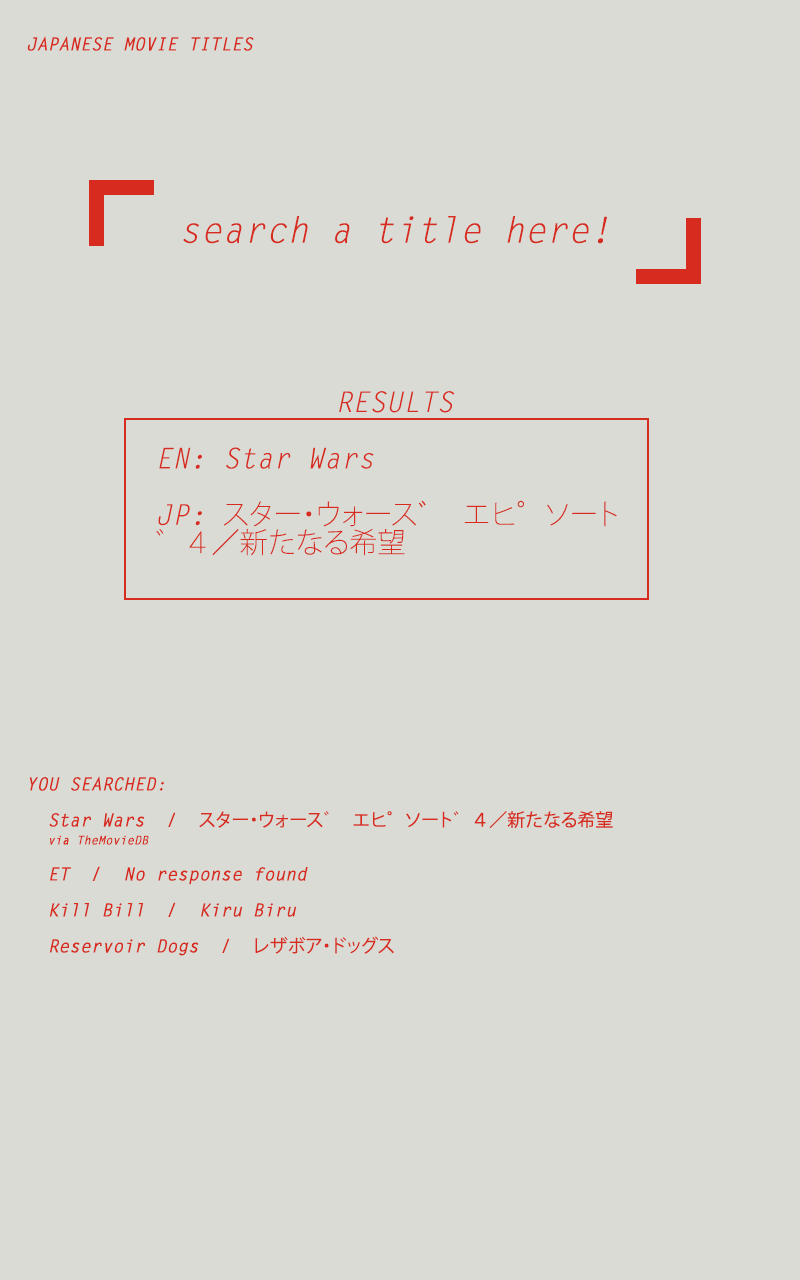
<style>
.page{position:relative;width:800px;height:1280px;background:#dbdbd5}
.page>*{position:absolute;margin:0}
.t1{font:18px "LetterGothicStd-BoldSlanted";color:#d62b1e}
.t2{font:36px "LetterGothicStd-Slanted";color:#d62b1e}
.t3{font:28.2px/56.4px "LetterGothicStd-Slanted";color:#d62b1e}
.t4{font:28.2px/28.2px "KozGoPr6N-ExtraLight";color:#d62b1e}
.t5{font:28.2px/28.2px "KozGoPr6N-Regular";color:#d62b1e}
.t6{font:18px/18px "LetterGothicStd-BoldSlanted";color:#d62b1e}
.t7{font:18px/72px "LetterGothicStd-BoldSlanted";color:#d62b1e}
.t8{font:18px/18px "KozGoPr6N-Regular";color:#d62b1e}
.t9{font:12px/18px "LetterGothicStd-BoldSlanted";color:#d62b1e}
</style>
<div class="page">
<p class="t1" style="left:27px;top:36px;width:227px;height:15px">JAPANESE MOVIE TITLES</p>
<p class="t2" style="left:183px;top:216px;width:424px;height:28px">search a title here!</p>
<p class="t3" style="left:156px;top:391px;width:461px;height:165px;text-align:center">RESULTS<br>EN: Star Wars<br>JP: <span class="t4">スター・ウォース</span><span class="t5">゙ </span><span class="t4">エピソード４／新たなる希望</span></p>
<p class="t6" style="left:29px;top:776px;width:584px;height:180px"><span class="t7">YOU SEARCHED: </span><br>  <br>  Star Wars  /  <span class="t8">スター・ウォーズ エピソード４／新たなる希望<br>  </span><span class="t9">via TheMovieDB<br><br></span>  ET  /  No response found<br><br>  Kill Bill  /  Kiru Biru<br><br>  Reservoir Dogs  /  <span class="t8">レザボア・ドッグス</span></p>
</div>
